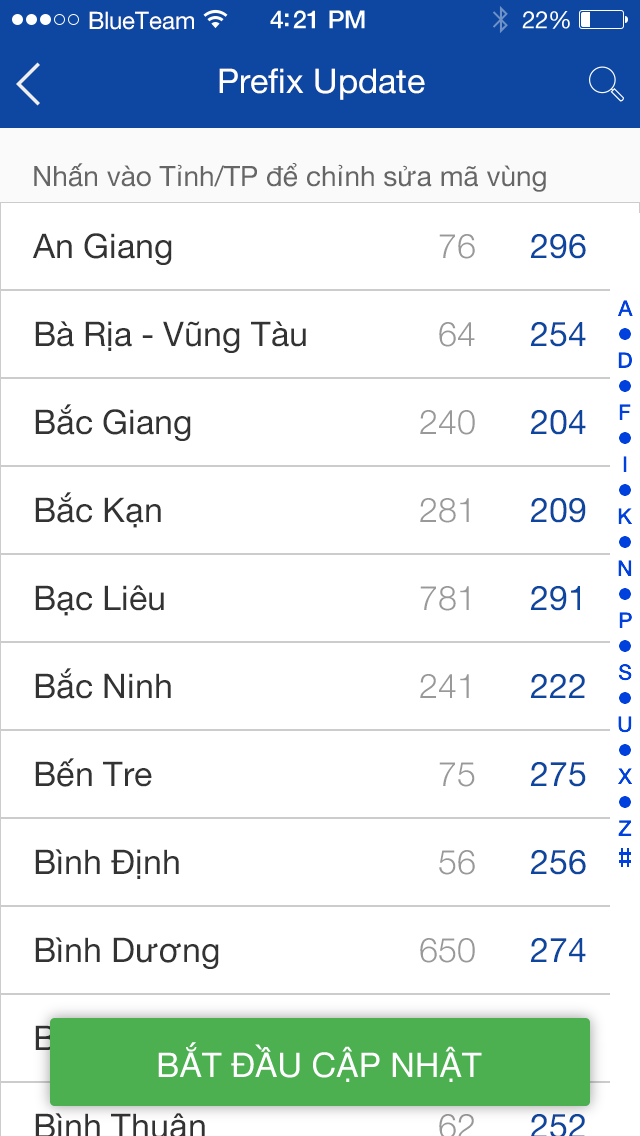
<style>
.page{position:relative;width:640px;height:1136px;background:#ffffff}
.page>*{position:absolute;margin:0}
.t1{font:24px "HelveticaNeue";color:#ffffff}
.t2{font:34px "HelveticaNeue";color:#ffffff}
.t3{font:28px "HelveticaNeue";color:#666666}
.t4{font:34px "HelveticaNeue";color:#333333}
.t5{font:34px "HelveticaNeue-Light";color:#999999}
.t6{font:34px "HelveticaNeue";color:#0c46a0}
.t7{font:34px "HelveticaNeue";color:#0c469f}
</style>
<div class="page">
<p class="t1" style="left:89px;top:11px;width:105px;height:19px">BlueTeam</p>
<p class="t2" style="left:219px;top:68px;width:206px;height:32px">Prefix Update</p>
<p class="t3" style="left:34px;top:163px;width:512px;height:29px">Nhấn vào Tỉnh/TP để chỉnh sửa mã vùng</p>
<p class="t4" style="left:32px;top:233px;width:140px;height:32px">An Giang</p>
<p class="t5" style="left:439px;top:234px;width:36px;height:25px">76</p>
<p class="t6" style="left:530px;top:234px;width:56px;height:25px">296</p>
<p class="t4" style="left:35px;top:321px;width:271px;height:32px">Bà Rịa - Vũng Tàu</p>
<p class="t5" style="left:439px;top:322px;width:36px;height:25px">64</p>
<p class="t7" style="left:530px;top:322px;width:56px;height:25px">254</p>
<p class="t4" style="left:35px;top:404px;width:156px;height:37px">Bắc Giang</p>
<p class="t5" style="left:420px;top:410px;width:55px;height:25px">240</p>
<p class="t7" style="left:530px;top:410px;width:56px;height:25px">204</p>
<p class="t4" style="left:35px;top:492px;width:126px;height:36px">Bắc Kạn</p>
<p class="t5" style="left:420px;top:498px;width:49px;height:25px">281</p>
<p class="t7" style="left:530px;top:498px;width:56px;height:25px">209</p>
<p class="t4" style="left:35px;top:585px;width:129px;height:31px">Bạc Liêu</p>
<p class="t5" style="left:420px;top:586px;width:49px;height:25px">781</p>
<p class="t7" style="left:530px;top:586px;width:50px;height:25px">291</p>
<p class="t4" style="left:35px;top:668px;width:136px;height:31px">Bắc Ninh</p>
<p class="t5" style="left:420px;top:674px;width:49px;height:24px">241</p>
<p class="t7" style="left:530px;top:674px;width:55px;height:24px">222</p>
<p class="t4" style="left:35px;top:758px;width:117px;height:29px">Bến Tre</p>
<p class="t5" style="left:439px;top:762px;width:36px;height:25px">75</p>
<p class="t7" style="left:530px;top:762px;width:56px;height:25px">275</p>
<p class="t4" style="left:35px;top:849px;width:144px;height:30px">Bình Định</p>
<p class="t5" style="left:439px;top:850px;width:36px;height:25px">56</p>
<p class="t7" style="left:530px;top:850px;width:56px;height:25px">256</p>
<p class="t4" style="left:35px;top:937px;width:184px;height:32px">Bình Dương</p>
<p class="t5" style="left:420px;top:938px;width:55px;height:25px">650</p>
<p class="t7" style="left:530px;top:938px;width:56px;height:24px">274</p>
</div>
